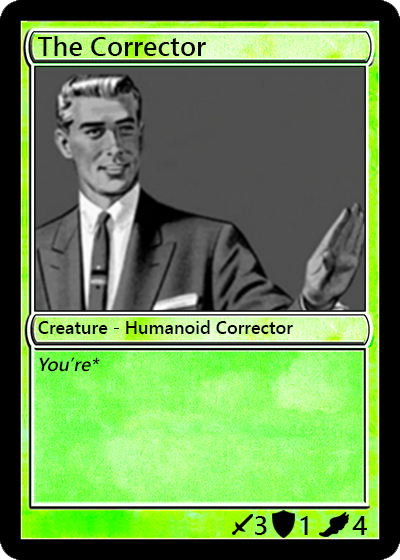
<style>
.page{position:relative;width:400px;height:560px}
.page>*{position:absolute;margin:0}
.t1{font:27px "YuGothicUI-Semibold";color:#000000}
.t2{font:18px "YuGothicUI-Semibold";color:#000000}
.t3{font:19px "YuGothicUI-Semibold";color:#000000;font-style:italic}
</style>
<div class="page">
<p class="t1" style="left:38px;top:36px;width:168px;height:20px">The Corrector</p>
<p class="t2" style="left:38px;top:320px;width:255px;height:14px">Creature - Humanoid Corrector</p>
<p class="t3" style="left:39px;top:357px;width:61px;height:15px">You’re*</p>
<p class="t1" style="left:255px;top:516px;width:12px;height:19px">3</p>
<p class="t1" style="left:300px;top:516px;width:8px;height:19px">1</p>
<p class="t1" style="left:352px;top:516px;width:15px;height:19px">4</p>
</div>
